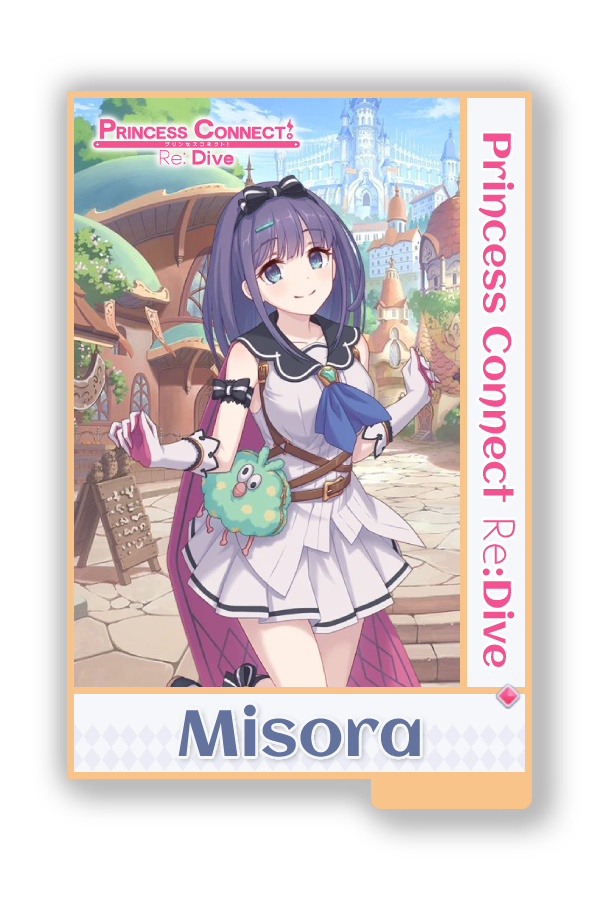
<style>
.page{position:relative;width:600px;height:900px;background:#ffffff}
.page>*{position:absolute;margin:0}
.t1{font:39px "Aclonica-Regular";color:#f55191}
.t2{font:39px "AaarghNormal";color:#f55191}
.t3{font:65px "Aclonica-Regular";color:#64739d}
</style>
<div class="page">
<p class="t1" style="left:478px;top:133px;width:38px;height:534px;rotate:90deg">Princess Connect <span class="t2">Re</span>:Dive</p>
<p class="t3" style="left:178px;top:704px;width:242px;height:53px">Misora</p>
</div>
